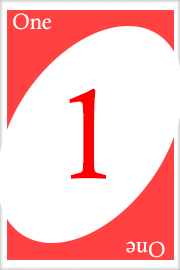
<style>
.page{position:relative;width:180px;height:270px;background:#ffffff}
.page>*{position:absolute;margin:0}
.t1{font:22px "CalistoMT";color:#ffffff}
.t2{font:128px "CalistoMT";color:#ff0001}
.t3{font:21.7px "CalistoMT";color:#ffffff}
</style>
<div class="page">
<p class="t1" style="left:13px;top:13px;width:38px;height:17px">One</p>
<p class="t2" style="left:69px;top:88px;width:38px;height:91px">1</p>
<p class="t3" style="left:126px;top:241px;width:39px;height:17px;rotate:180deg">One</p>
</div>
